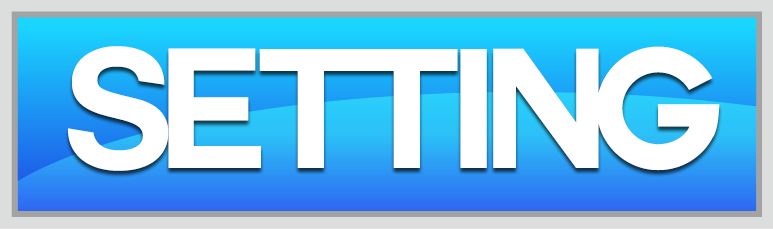
<style>
.page{position:relative;width:773px;height:229px;background:#ffffff}
.page>*{position:absolute;margin:0}
.t1{font:166.7px "Couture-Bold";letter-spacing:-0.075em;color:#ffffff}
</style>
<div class="page">
<p class="t1" style="left:68px;top:46px;width:652px;height:125px">setting</p>
</div>
